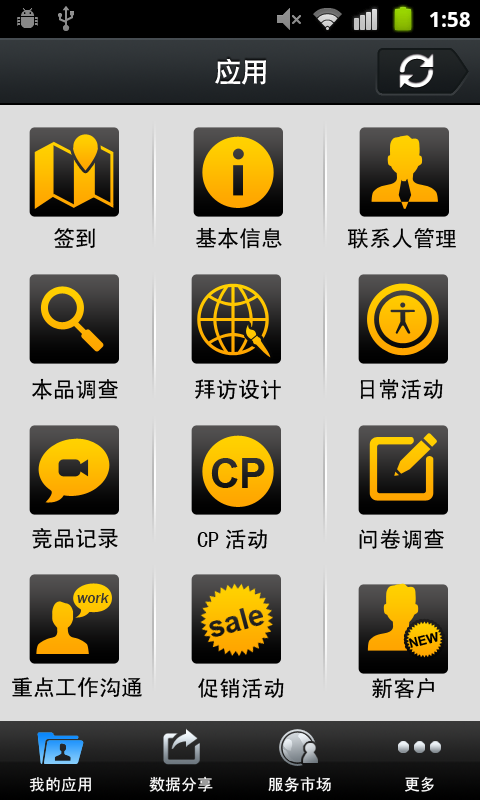
<style>
.page{position:relative;width:480px;height:800px;background:#dddddd}
.page>*{position:absolute;margin:0}
.t1{font:27px "CTCuHeiSJ";color:#ffffff}
.t2{font:22px "SimHei";color:#000000}
.t3{font:15px "FranklinGothic-MediumItalic";color:#353434}
.t4{font:13px "Arial-BoldMT";color:#000000}
.t5{font:16px "SimHei";color:#ffffff}
</style>
<div class="page">
<p class="t1" style="left:215px;top:58px;width:51px;height:27px">应用</p>
<p class="t2" style="left:54px;top:228px;width:41px;height:20px">签到</p>
<p class="t2" style="left:196px;top:227px;width:86px;height:22px">基本信息</p>
<p class="t2" style="left:347px;top:228px;width:109px;height:21px">联系人管理</p>
<p class="t2" style="left:32px;top:378px;width:86px;height:22px">本品调查</p>
<p class="t2" style="left:195px;top:379px;width:86px;height:21px">拜访设计</p>
<p class="t2" style="left:360px;top:378px;width:83px;height:22px">日常活动</p>
<p class="t2" style="left:32px;top:528px;width:86px;height:21px">竞品记录</p>
<p class="t2" style="left:197px;top:529px;width:70px;height:21px">CP活动</p>
<p class="t2" style="left:359px;top:529px;width:85px;height:20px">问卷调查</p>
<p class="t3" style="left:77px;top:593px;width:32px;height:10px">work</p>
<p class="t4" style="left:408px;top:632px;width:30px;height:16px;rotate:-15deg">NEW</p>
<p class="t2" style="left:12px;top:677px;width:130px;height:21px">重点工作沟通</p>
<p class="t2" style="left:198px;top:678px;width:86px;height:21px">促销活动</p>
<p class="t2" style="left:372px;top:678px;width:62px;height:21px">新客户</p>
<p class="t5" style="left:29px;top:777px;width:62px;height:15px">我的应用</p>
<p class="t5" style="left:149px;top:776px;width:64px;height:16px">数据分享</p>
<p class="t5" style="left:268px;top:776px;width:63px;height:16px">服务市场</p>
<p class="t5" style="left:405px;top:776px;width:29px;height:16px">更多</p>
</div>
